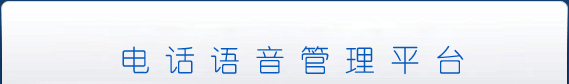
<style>
.page{position:relative;width:569px;height:84px}
.page>*{position:absolute;margin:0}
.t1{font:30px "YouYuan";color:#0559bd}
</style>
<div class="page">
<p class="t1" style="left:122px;top:46px;width:342px;height:29px">电 话 语 音 管 理 平 台</p>
</div>
